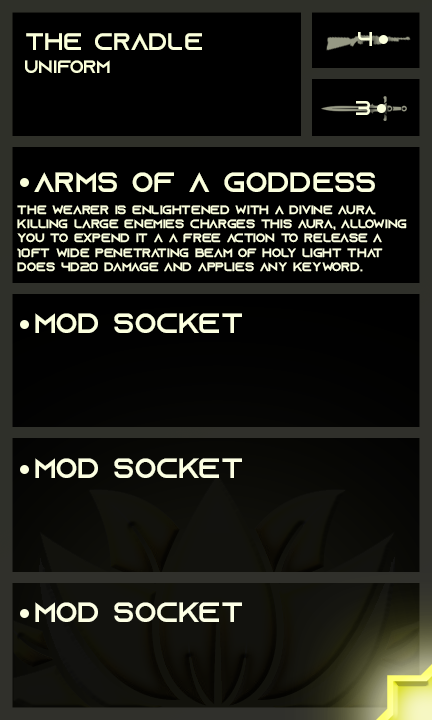
<style>
.page{position:relative;width:432px;height:720px;background:#000000}
.page>*{position:absolute;margin:0}
.t1{font:24px "AzonixRegular";color:#faffda}
.t2{font:20px "AzonixRegular";color:#fbffdc}
.t3{font:18px "AzonixRegular";color:#faffda}
.t4{font:20px "AzonixRegular";color:#fbffde}
.t5{font:28px "AzonixRegular";color:#fbffde}
.t6{font:12px "AzonixRegular";color:#fbffde}
.t7{font:28px "AzonixRegular";color:#fcffdf}
.t8{font:28px "AzonixRegular";color:#fcffe2}
.t9{font:28px "AzonixRegular";color:#fdffe5}
</style>
<div class="page">
<p class="t1" style="left:26px;top:33px;width:176px;height:17px">the cradle</p>
<p class="t2" style="left:358px;top:32px;width:14px;height:14px">4</p>
<p class="t3" style="left:25px;top:60px;width:85px;height:13px">uniform</p>
<p class="t4" style="left:356px;top:101px;width:14px;height:14px">3</p>
<p class="t5" style="left:34px;top:172px;width:341px;height:20px">arms of a goddess</p>
<p class="t6" style="left:17px;top:205px;width:390px;height:67px">the wearer is enlightened with a divine aura.<br>killing large enemies charges this aura, allowing <br>you to expend it a a free action to release a <br>10ft wide penetrating beam of holy light that <br>does 4d20 damage and applies any keyword.</p>
<p class="t7" style="left:35px;top:313px;width:207px;height:20px">mod socket</p>
<p class="t8" style="left:35px;top:458px;width:207px;height:20px">mod socket</p>
<p class="t9" style="left:35px;top:602px;width:207px;height:20px">mod socket</p>
</div>
